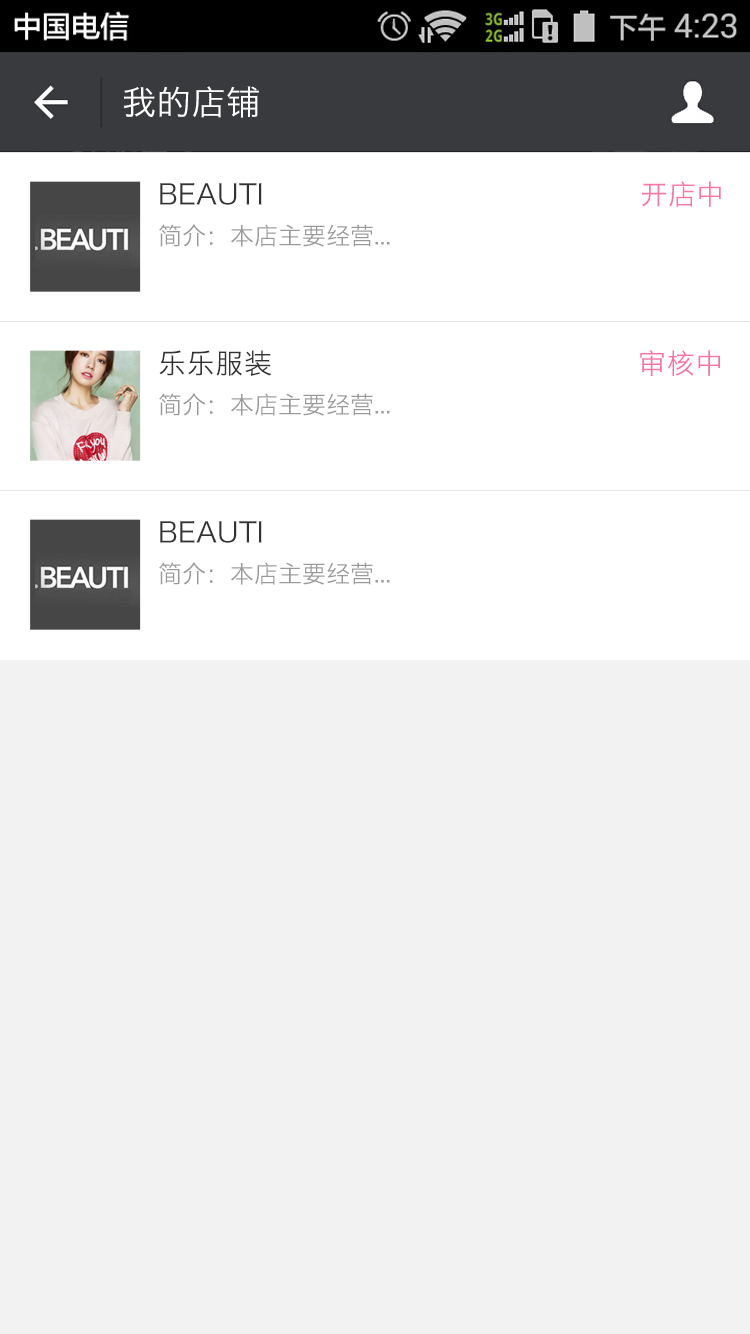
<style>
.page{position:relative;width:750px;height:1334px;background:#f2f2f2}
.page>*{position:absolute;margin:0}
.t1{font:34px "HiraginoSansGB-W3";letter-spacing:0.022em;color:#ffffff}
.t2{font:28px "HiraginoSansGB-W3";color:#333333}
.t3{font:28px "HiraginoSansGB-W3";color:#fa76a4}
.t4{font:24px "HiraginoSansGB-W3";color:#999999}
.t5{font:28px "HiraginoSansGB-W3";letter-spacing:0.022em;color:#333333}
.t6{font:28px "HiraginoSansGB-W3";letter-spacing:0.022em;color:#f972a1}
</style>
<div class="page">
<p class="t1" style="left:123px;top:86px;width:136px;height:32px">我的店铺</p>
<p class="t2" style="left:160px;top:183px;width:102px;height:22px">BEAUTI</p>
<p class="t3" style="left:642px;top:181px;width:79px;height:26px">开店中</p>
<p class="t4" style="left:159px;top:224px;width:231px;height:23px">简介：本店主要经营...</p>
<p class="t5" style="left:159px;top:350px;width:113px;height:26px">乐乐服装</p>
<p class="t5" style="left:159px;top:350px;width:113px;height:26px">乐乐服装</p>
<p class="t6" style="left:640px;top:350px;width:81px;height:26px">审核中</p>
<p class="t6" style="left:640px;top:350px;width:81px;height:26px">审核中</p>
<p class="t4" style="left:159px;top:393px;width:231px;height:23px">简介：本店主要经营...</p>
<p class="t2" style="left:160px;top:521px;width:102px;height:22px">BEAUTI</p>
<p class="t4" style="left:159px;top:562px;width:231px;height:23px">简介：本店主要经营...</p>
</div>
